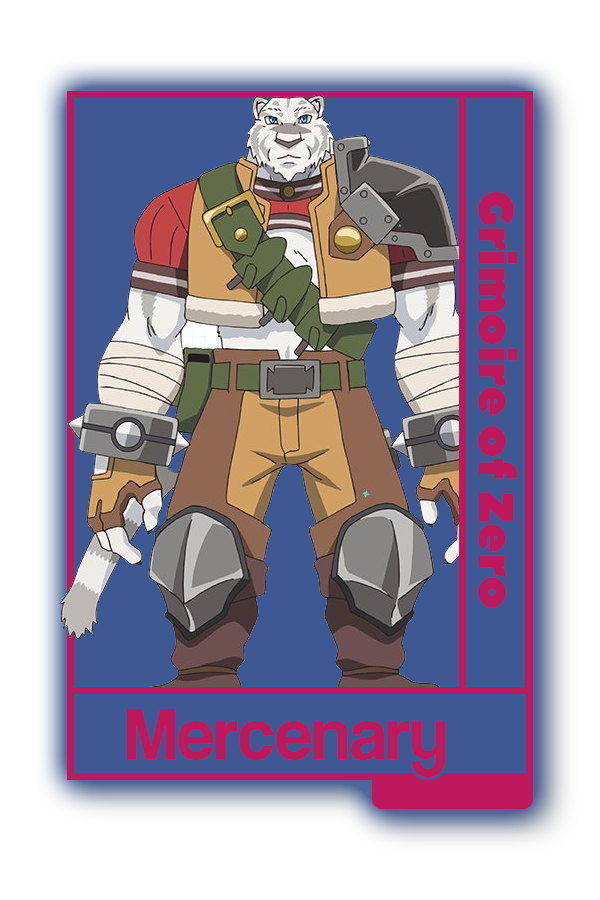
<style>
.page{position:relative;width:600px;height:900px;background:#3d5892}
.page>*{position:absolute;margin:0}
.t1{font:48.8px "PeaceSans";color:#bf195e}
.t2{font:75px "CoolveticaRg-Regular";color:#bf195e}
</style>
<div class="page">
<p class="t1" style="left:478px;top:192px;width:39px;height:416px;rotate:90deg">Grimoire of Zero</p>
<p class="t2" style="left:126px;top:709px;width:320px;height:68px">Mercenary</p>
</div>
